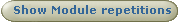
<style>
.page{position:relative;width:180px;height:22px}
.page>*{position:absolute;margin:0}
.t1{font:11px "Verdana-Bold";color:#336699}
</style>
<div class="page">
<p class="t1" style="left:14px;top:5px;width:157px;height:11px">Show Module repetitions</p>
</div>
